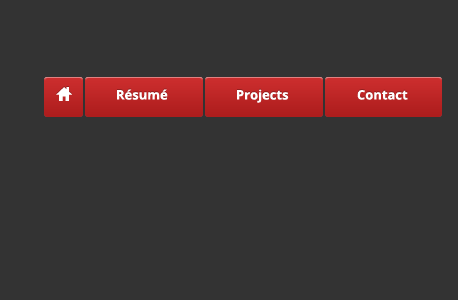
<style>
.page{position:relative;width:458px;height:300px;background:#333333}
.page>*{position:absolute;margin:0}
.t1{font:13px "OpenSans-Bold";color:#ffffff}
</style>
<div class="page">
<p class="t1" style="left:117px;top:89px;width:51px;height:11px">Résumé</p>
<p class="t1" style="left:237px;top:89px;width:52px;height:14px">Projects</p>
<p class="t1" style="left:357px;top:90px;width:51px;height:10px">Contact</p>
</div>
